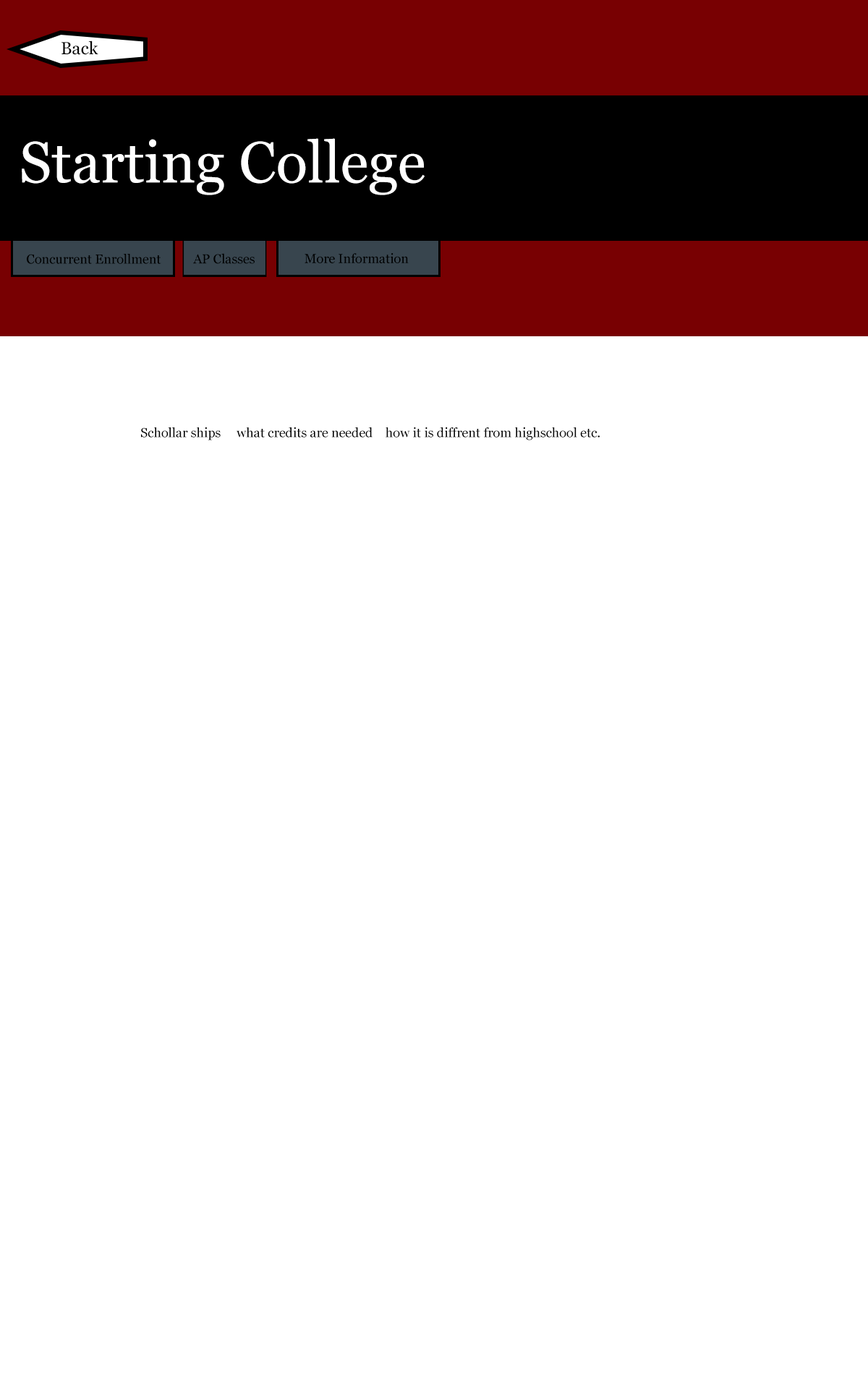
<style>
.page{position:relative;width:868px;height:1374px;background:#ffffff}
.page>*{position:absolute;margin:0}
.t1{font:57.9px "Georgia";color:#ffffff}
.t2{font:13px "Georgia";color:#000000}
</style>
<div class="page">
<p class="t1" style="left:22px;top:138px;width:403px;height:57px">Starting College</p>
<p class="t2" style="left:27px;top:254px;width:134px;height:10px">Concurrent Enrollment</p>
<p class="t2" style="left:193px;top:253px;width:62px;height:11px">AP Classes</p>
<p class="t2" style="left:304px;top:253px;width:105px;height:10px">More Information</p>
<p class="t2" style="left:141px;top:427px;width:459px;height:13px">Schollar ships     what credits are needed    how it is diffrent from highschool etc.</p>
</div>
